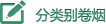
<style>
.page{position:relative;width:106px;height:24px;background:#ffffff}
.page>*{position:absolute;margin:0}
.t1{font:14px "MicrosoftYaHei";color:#36976e}
</style>
<div class="page">
<p class="t1" style="left:35px;top:8px;width:70px;height:14px">分类别卷烟</p>
</div>
